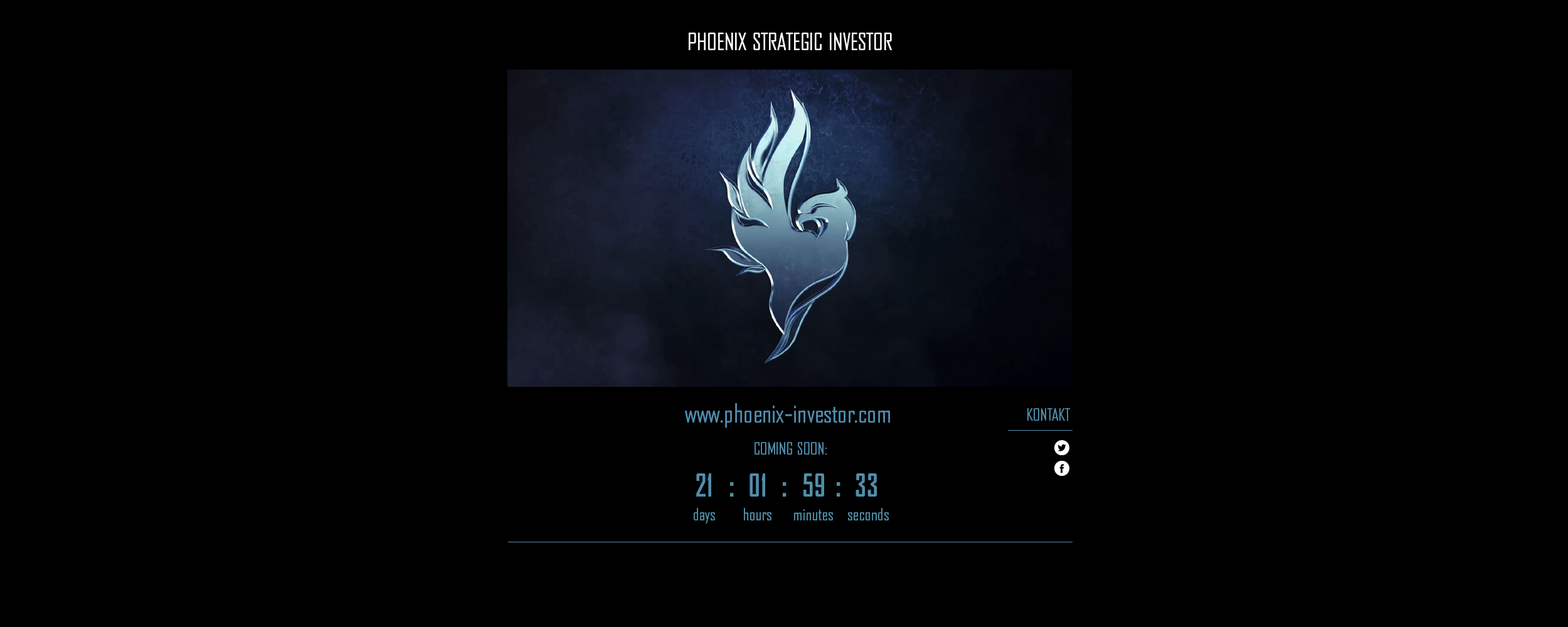
<style>
.page{position:relative;width:1568px;height:627px;background:#000000}
.page>*{position:absolute;margin:0}
.t1{font:22.6px "BureauAgency";color:#ffffff}
.t2{font:25.1px "BureauAgency";color:#518eb0}
.t3{font:16.3px "BureauAgency";color:#518eaa}
.t4{font:16.3px "BureauAgency";color:#518eb0}
.t5{font:30.1px "BureauAgencyBold";color:#518eaa}
</style>
<div class="page">
<p class="t1" style="left:689px;top:33px;width:203px;height:17px">PHOENIX STRATEGIC INVESTOR</p>
<p class="t2" style="left:685px;top:403px;width:205px;height:25px">www.phoenix-investor.com</p>
<p class="t3" style="left:1027px;top:408px;width:43px;height:13px">KONTAKT</p>
<p class="t4" style="left:755px;top:442px;width:72px;height:13px">COMING SOON:</p>
<p class="t5" style="left:696px;top:474px;width:15px;height:23px">21</p>
<p class="t5" style="left:750px;top:474px;width:15px;height:23px">01</p>
<p class="t5" style="left:803px;top:474px;width:21px;height:23px">59</p>
<p class="t5" style="left:856px;top:474px;width:21px;height:23px">33</p>
<p class="t5" style="left:730px;top:482px;width:4px;height:15px">:</p>
<p class="t5" style="left:783px;top:482px;width:4px;height:15px">:</p>
<p class="t5" style="left:837px;top:482px;width:3px;height:15px">:</p>
<p class="t3" style="left:694px;top:508px;width:21px;height:16px">days</p>
<p class="t3" style="left:744px;top:508px;width:27px;height:13px">hours</p>
<p class="t3" style="left:794px;top:509px;width:39px;height:12px">minutes</p>
<p class="t3" style="left:848px;top:508px;width:41px;height:13px">seconds</p>
</div>
